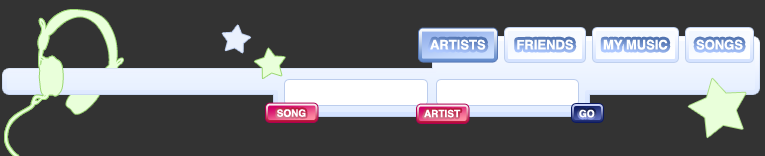
<style>
.page{position:relative;width:765px;height:156px;background:#333333}
.page>*{position:absolute;margin:0}
.t1{font:13px "Helvetica-Bold";color:#ffffff}
.t2{font:10px "Helvetica-Bold";color:#ffffff}
</style>
<div class="page">
<p class="t1" style="left:430px;top:39px;width:56px;height:11px">ARTISTS</p>
<p class="t1" style="left:517px;top:39px;width:57px;height:11px">FRIENDS</p>
<p class="t1" style="left:603px;top:39px;width:65px;height:11px">MY MUSIC</p>
<p class="t1" style="left:696px;top:39px;width:47px;height:11px">SONGS</p>
<p class="t2" style="left:277px;top:109px;width:29px;height:8px">SONG</p>
<p class="t2" style="left:424px;top:109px;width:37px;height:9px">ARTIST</p>
<p class="t2" style="left:579px;top:109px;width:16px;height:9px">GO</p>
</div>
